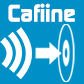
<style>
.page{position:relative;width:84px;height:84px;background:#0090c8}
.page>*{position:absolute;margin:0}
.t1{font:24px "ContinuumBold";color:#ffffff}
</style>
<div class="page">
<p class="t1" style="left:8px;top:3px;width:67px;height:19px">Cafiine</p>
</div>
